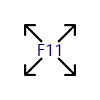
<style>
.page{position:relative;width:100px;height:100px;background:#ffffff}
.page>*{position:absolute;margin:0}
.t1{font:17.1px "NirmalaUI";color:#000099}
</style>
<div class="page">
<p class="t1" style="left:38px;top:44px;width:23px;height:12px">F11</p>
</div>
